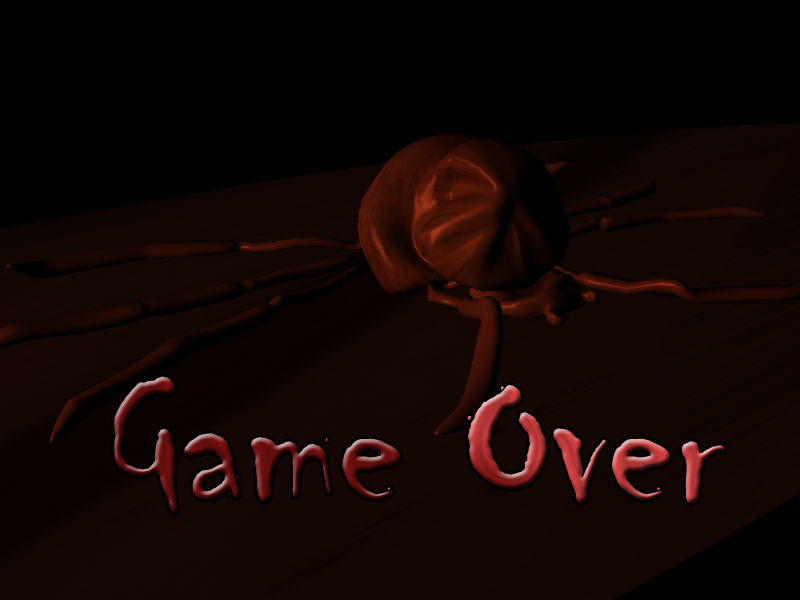
<style>
.page{position:relative;width:800px;height:600px;background:#000000}
.page>*{position:absolute;margin:0}
.t1{font:200px "Chiller-Regular"}
</style>
<div class="page">
<p class="t1" style="left:114px;top:376px;width:610px;height:137px">Game Over</p>
</div>
